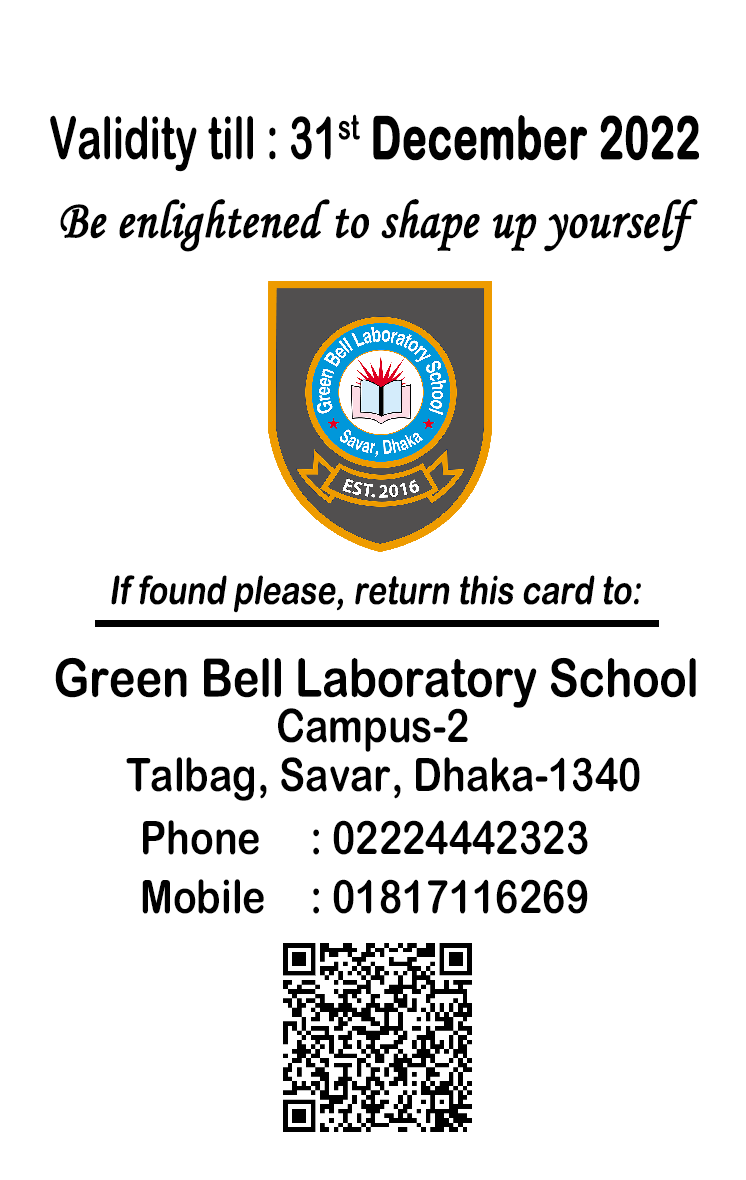
<style>
.page{position:relative;width:746px;height:1180px;background:#ffffff}
.page>*{position:absolute;margin:0}
.t1{font:58.8px "ArialRoundedMTBold";color:#000000;scale:0.7 1}
.t2{font:58.8px "ArialRoundedMTBold";color:#000000;font-weight:bold;scale:0.7 1}
.t3{font:53.5px "MonotypeCorsiva";color:#000000;font-weight:bold;scale:0.88 1}
.t4{font:39.2px "ArialRoundedMTBold";color:#000000;font-style:italic;scale:0.81 1}
.t5{font:52.9px "ArialRoundedMTBold";color:#000000;scale:0.85 1}
.t6{font:46.3px "ArialRoundedMTBold";color:#000000;scale:0.85 1}
</style>
<div class="page">
<p class="t1" style="left:50px;top:114px;width:649px;height:58px">Validity till : 31st<span class="t2"> December 2022</span></p>
<p class="t3" style="left:60px;top:199px;width:638px;height:53px">Be enlightened to shape up yourself</p>
<p class="t4" style="left:111px;top:575px;width:530px;height:38px">If found please, return this card to:</p>
<p class="t5" style="left:55px;top:657px;width:641px;height:51px">Green Bell Laboratory School</p>
<p class="t6" style="left:278px;top:708px;width:190px;height:44px">Campus-2</p>
<p class="t6" style="left:126px;top:757px;width:514px;height:44px">Talbag, Savar, Dhaka-1340</p>
<p class="t6" style="left:143px;top:820px;width:445px;height:35px">Phone : 02224442323</p>
<p class="t6" style="left:142px;top:879px;width:446px;height:35px">Mobile : 01817116269</p>
</div>
